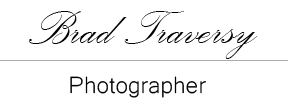
<style>
.page{position:relative;width:288px;height:109px;background:#ffffff}
.page>*{position:absolute;margin:0}
.t1{font:60.7px "PalaceScriptMT";color:#000000}
.t2{font:30.3px "Microsoft-Yi-Baiti";color:#000000}
</style>
<div class="page">
<p class="t1" style="left:29px;top:11px;width:229px;height:48px">Brad Traversy</p>
<p class="t2" style="left:70px;top:76px;width:136px;height:22px">Photographer</p>
</div>
